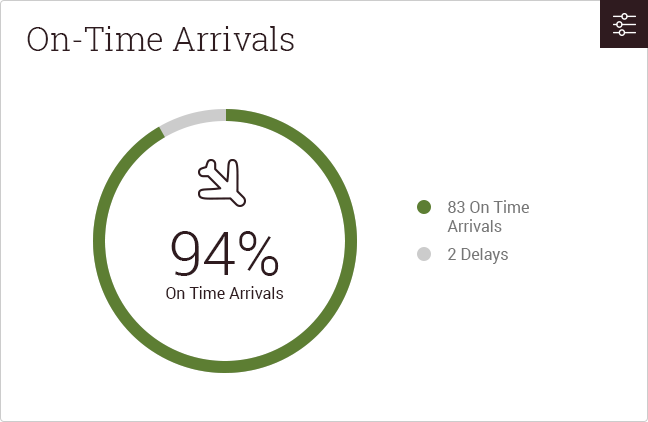
<style>
.page{position:relative;width:648px;height:422px;background:#ffffff}
.page>*{position:absolute;margin:0}
.t1{font:33px "RobotoSlab-Light";color:#2f1b1f}
.t2{font:16px "Roboto-Regular";color:#767676}
.t3{font:61px "Roboto-Light";color:#2f1b1f}
.t4{font:16px "Roboto-Regular";color:#2f1b1f}
</style>
<div class="page">
<p class="t1" style="left:27px;top:26px;width:267px;height:25px">On-Time Arrivals</p>
<p class="t2" style="left:447px;top:200px;width:82px;height:32px">83 On Time <br>Arrivals</p>
<p class="t3" style="left:171px;top:231px;width:108px;height:45px">94%</p>
<p class="t2" style="left:448px;top:248px;width:60px;height:16px">2 Delays</p>
<p class="t4" style="left:166px;top:286px;width:118px;height:13px">On Time Arrivals</p>
</div>
